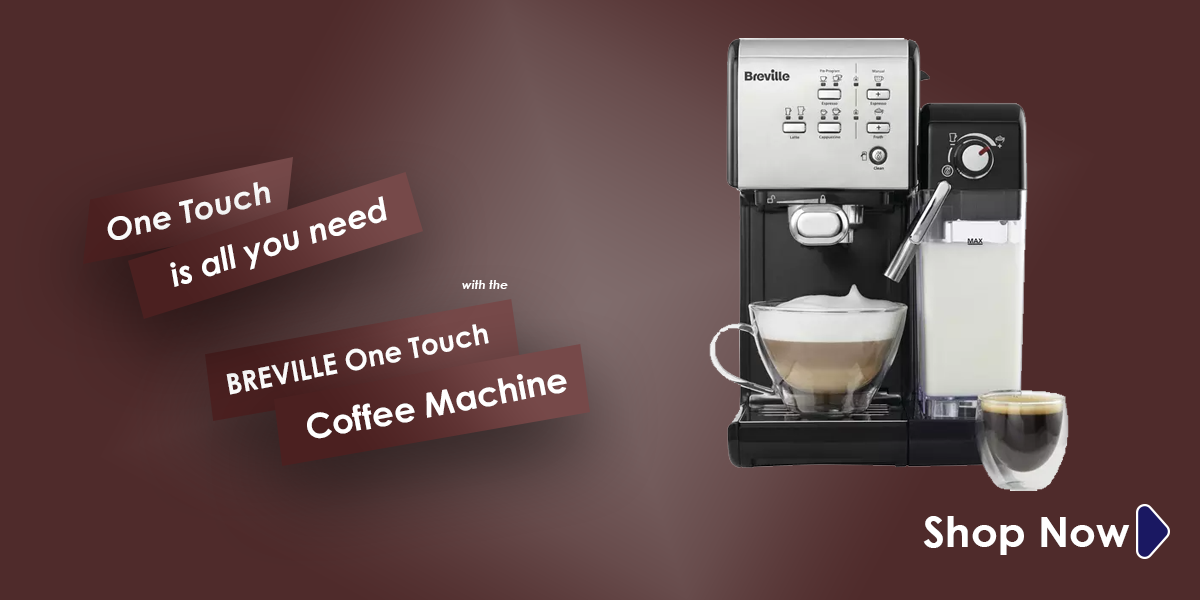
<style>
.page{position:relative;width:1200px;height:600px;background:#4f2b2b}
.page>*{position:absolute;margin:0}
.t1{font:31.2px "CenturyGothic-BoldItalic";color:#ffffff;scale:1.03 1}
.t2{font:32.3px "CenturyGothic-BoldItalic";color:#ffffff}
.t3{font:12.3px "CenturyGothic-BoldItalic";color:#ffffff}
.t4{font:28.7px "CenturyGothic-Bold";color:#ffffff}
.t5{font:34.1px "CenturyGothic-Bold";color:#ffffff}
.t6{font:42.4px "CenturyGothic-Bold";color:#ffffff}
</style>
<div class="page">
<p class="t1" style="left:107px;top:182px;width:164px;height:58px;rotate:-14deg">One Touch</p>
<p class="t2" style="left:170px;top:196px;width:217px;height:91px;rotate:-18deg">is all you need</p>
<p class="t3" style="left:462px;top:280px;width:46px;height:9px">with the</p>
<p class="t4" style="left:226px;top:324px;width:263px;height:71px;rotate:-11deg">BREVILLE One Touch</p>
<p class="t5" style="left:307px;top:374px;width:260px;height:65px;rotate:-11deg">Coffee Machine</p>
<p class="t6" style="left:923px;top:516px;width:207px;height:39px">Shop Now</p>
</div>
